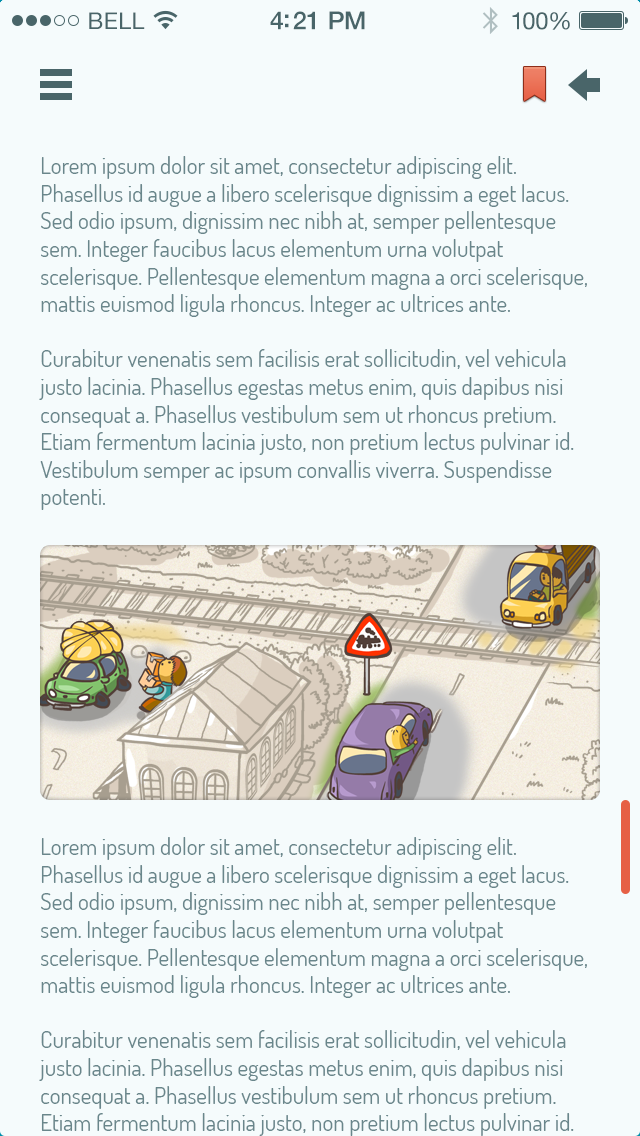
<style>
.page{position:relative;width:640px;height:1136px;background:#f5fbfc}
.page>*{position:absolute;margin:0}
.t1{font:23px "HelveticaNeue";letter-spacing:0.02em;color:#496569}
.t2{font:25px "HelveticaNeue-Medium";letter-spacing:-0.02em;color:#496569}
.t3{font:24px "HelveticaNeue";letter-spacing:-0.02em;color:#496569}
.t4{font:23px "Dosis-Book";color:#69868b}
</style>
<div class="page">
<p class="t1" style="left:89px;top:12px;width:56px;height:17px">BELL</p>
<p class="t2" style="left:270px;top:11px;width:95px;height:19px">4:21 PM</p>
<p class="t3" style="left:512px;top:12px;width:58px;height:18px">100%</p>
<p class="t4" style="left:39px;top:156px;width:548px;height:354px">Lorem ipsum dolor sit amet, consectetur adipiscing elit. <br>Phasellus id augue a libero scelerisque dignissim a eget lacus. Sed odio ipsum, dignissim nec nibh at, semper pellentesque sem. Integer faucibus lacus elementum urna volutpat <br>scelerisque. Pellentesque elementum magna a orci scelerisque, mattis euismod ligula rhoncus. Integer ac ultrices ante. <br><br>Curabitur venenatis sem facilisis erat sollicitudin, vel vehicula justo lacinia. Phasellus egestas metus enim, quis dapibus nisi consequat a. Phasellus vestibulum sem ut rhoncus pretium. Etiam fermentum lacinia justo, non pretium lectus pulvinar id. Vestibulum semper ac ipsum convallis viverra. Suspendisse <br>potenti.</p>
</div>
